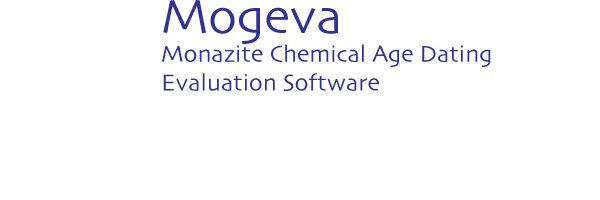
<style>
.page{position:relative;width:600px;height:200px;background:#ffffff}
.page>*{position:absolute;margin:0}
.t1{font:24px "Skia-Regular";color:#303293}
.t2{font:50px "Skia-Regular";color:#303293}
</style>
<div class="page">
<p class="t1" style="left:162px;top:0px;width:329px;height:91px"><span class="t2">Mogeva<br></span>Monazite Chemical Age Dating<br>Evaluation Software</p>
</div>
